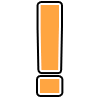
<style>
.page{position:relative;width:100px;height:100px;background:#ffffff}
.page>*{position:absolute;margin:0}
.t1{font:136px "Kanit-Medium";color:#ffa541}
</style>
<div class="page">
<p class="t1" style="left:40px;top:5px;width:20px;height:88px">!</p>
<p class="t1" style="left:40px;top:5px;width:20px;height:88px">!</p>
</div>
